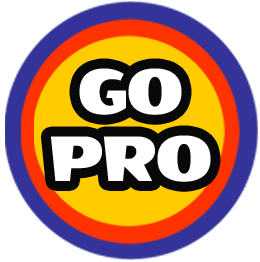
<style>
.page{position:relative;width:260px;height:262px;background:#ffffff}
.page>*{position:absolute;margin:0}
.t1{font:73.5px/67px "WendyOne-Regular";color:#ffffff}
</style>
<div class="page">
<p class="t1" style="left:50px;top:68px;width:161px;height:114px;text-align:center">GO<br>PRO</p>
</div>
